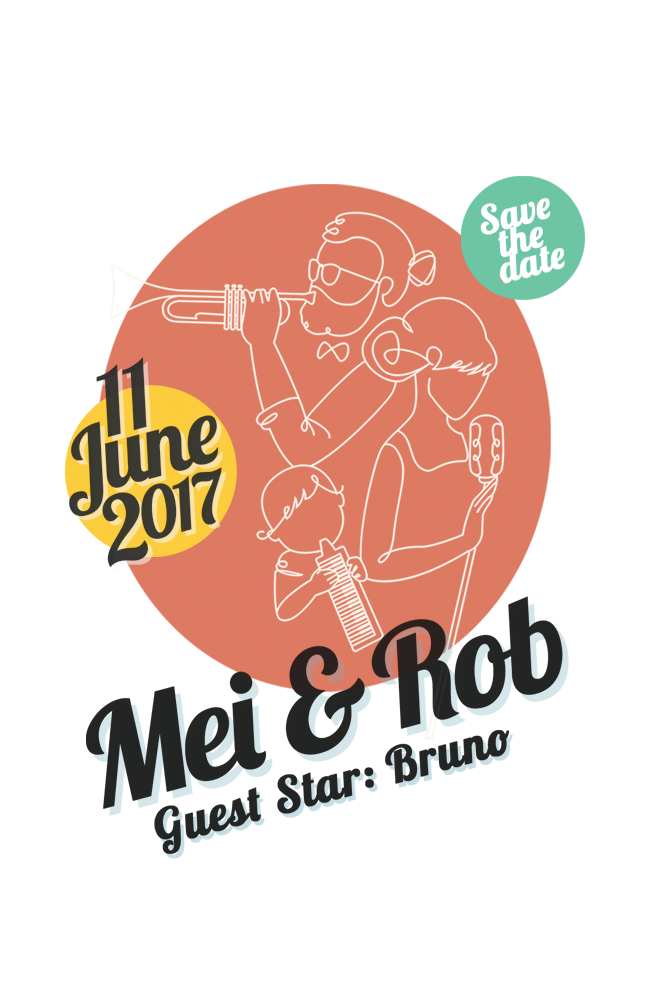
<style>
.page{position:relative;width:650px;height:1004px;background:#ffffff}
.page>*{position:absolute;margin:0}
.t1{font:90.8px/51.2px "Lobster-Regular";letter-spacing:-0.03em;color:#3b3933}
.t2{font:90.8px/67.9px "Lobster-Regular";letter-spacing:-0.03em;color:#3b3933}
.t3{font:90.8px/74.1px "Lobster-Regular";letter-spacing:-0.07em;color:#3b3933;font-weight:bold}
.t4{font:69.3px/59.8px "Lobster-Regular";letter-spacing:-0.07em;color:#3b3933;font-weight:bold}
.t5{font:90.8px/51.2px "Lobster-Regular";letter-spacing:-0.03em}
.t6{font:90.8px/67.9px "Lobster-Regular";letter-spacing:-0.03em}
.t7{font:90.8px/74.1px "Lobster-Regular";letter-spacing:-0.07em;font-weight:bold}
.t8{font:69.3px/59.8px "Lobster-Regular";letter-spacing:-0.07em;font-weight:bold}
.t9{font:135.1px "Lobster-Regular";letter-spacing:-0.05em;color:#0f1212;font-weight:bold}
.t10{font:135.1px "Lobster-Regular";letter-spacing:-0.05em;font-weight:bold}
.t11{font:47.9px "Lobster-Regular";letter-spacing:0.01em;color:#0f1212;font-weight:bold}
.t12{font:47.9px "Lobster-Regular";letter-spacing:0.01em;font-weight:bold}
</style>
<div class="page">
<p class="t1" style="left:69px;top:357px;width:153px;height:210px;text-align:center;rotate:-15deg"><span class="t2">11<br></span>June<br> <span class="t3">2</span><span class="t4">017</span></p>
<p class="t5" style="left:74px;top:361px;width:152px;height:210px;text-align:center;rotate:-15deg"><span class="t6">11<br></span>June<br> <span class="t7">2</span><span class="t8">017</span></p>
<p class="t9" style="left:86px;top:596px;width:477px;height:213px;rotate:-15deg;opacity:0.95">Mei &amp; Rob</p>
<p class="t10" style="left:92px;top:603px;width:477px;height:213px;rotate:-15deg">Mei &amp; Rob</p>
<p class="t11" style="left:154px;top:730px;width:355px;height:124px;rotate:-15deg;opacity:0.95">Guest Star: Bruno</p>
<p class="t12" style="left:158px;top:734px;width:355px;height:125px;rotate:-15deg">Guest Star: Bruno</p>
</div>
